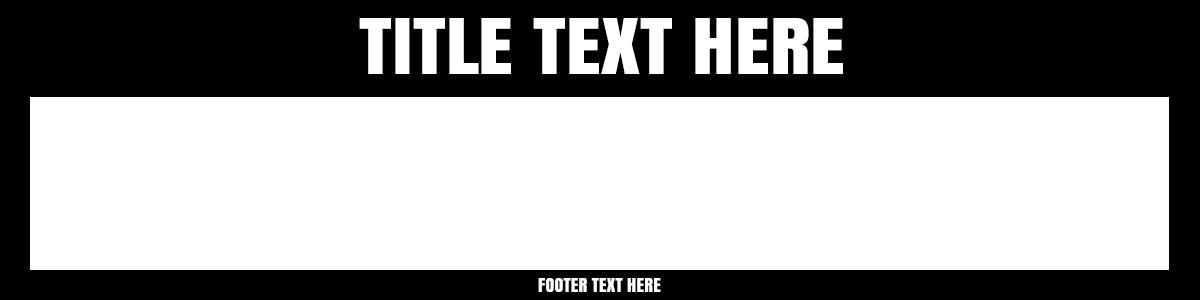
<style>
.page{position:relative;width:1200px;height:300px;background:#ffffff}
.page>*{position:absolute;margin:0}
.t1{font:72px "Anton";color:#ffffff;scale:1.16 1}
.t2{font:18.5px "Anton";color:#ffffff}
</style>
<div class="page">
<p class="t1" style="left:359px;top:18px;width:484px;height:56px">TITLE TEXT HERE</p>
<p class="t2" style="left:538px;top:278px;width:123px;height:14px">FOOTER TEXT HERE</p>
</div>
